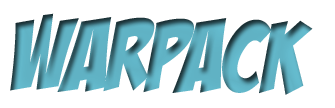
<style>
.page{position:relative;width:335px;height:108px;background:#ffffff}
.page>*{position:absolute;margin:0}
.t1{font:100px "BadaBoomBB";color:#65bccf}
</style>
<div class="page">
<p class="t1" style="left:10px;top:13px;width:303px;height:82px;rotate:1deg">Warpack</p>
</div>
